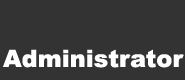
<style>
.page{position:relative;width:185px;height:80px;background:#333333}
.page>*{position:absolute;margin:0}
.t1{font:24px "Arial-Black";color:#ffffff}
</style>
<div class="page">
<p class="t1" style="left:3px;top:49px;width:181px;height:19px">Administrator</p>
</div>
